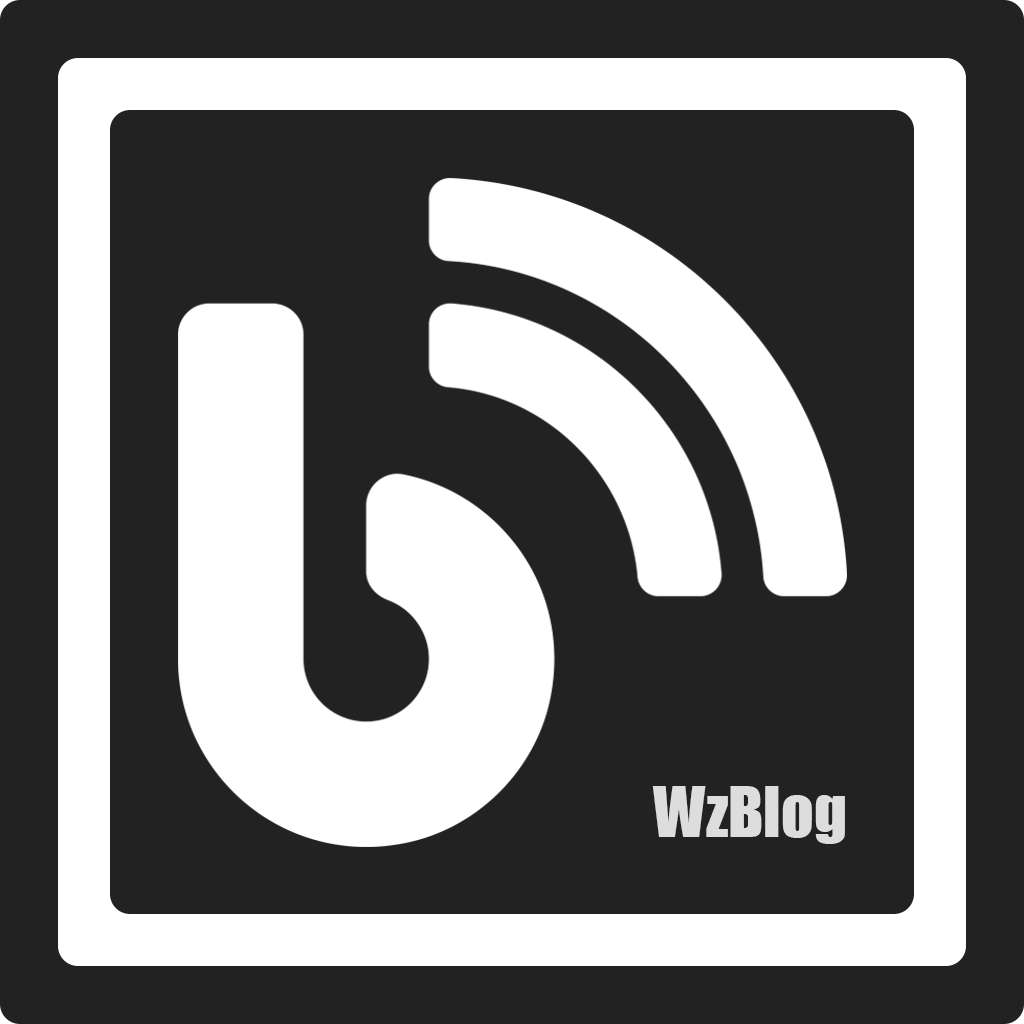
<style>
.page{position:relative;width:1024px;height:1024px;background:#222222}
.page>*{position:absolute;margin:0}
.t1{font:64px "Impact";color:#dddddd}
</style>
<div class="page">
<p class="t1" style="left:652px;top:786px;width:193px;height:58px">WzBlog</p>
</div>
